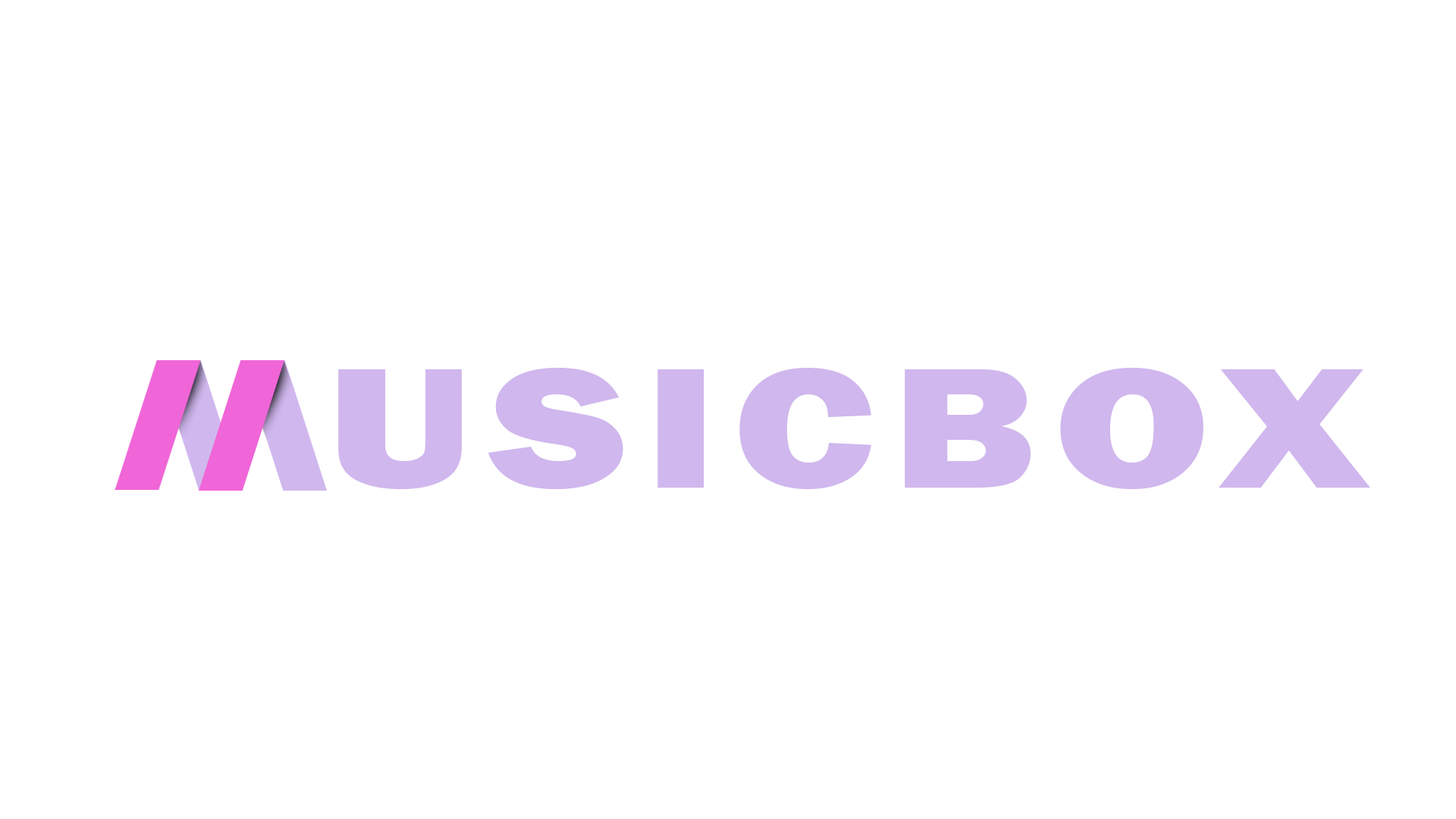
<style>
.page{position:relative;width:1456px;height:819px;background:#ffffff}
.page>*{position:absolute;margin:0}
.t1{font:177.6px "FranklinGothic-Heavy";letter-spacing:0.075em;color:#d0b7ed;scale:1.27 1}
</style>
<div class="page">
<p class="t1" style="left:338px;top:368px;width:1032px;height:121px">USICBOX</p>
</div>
